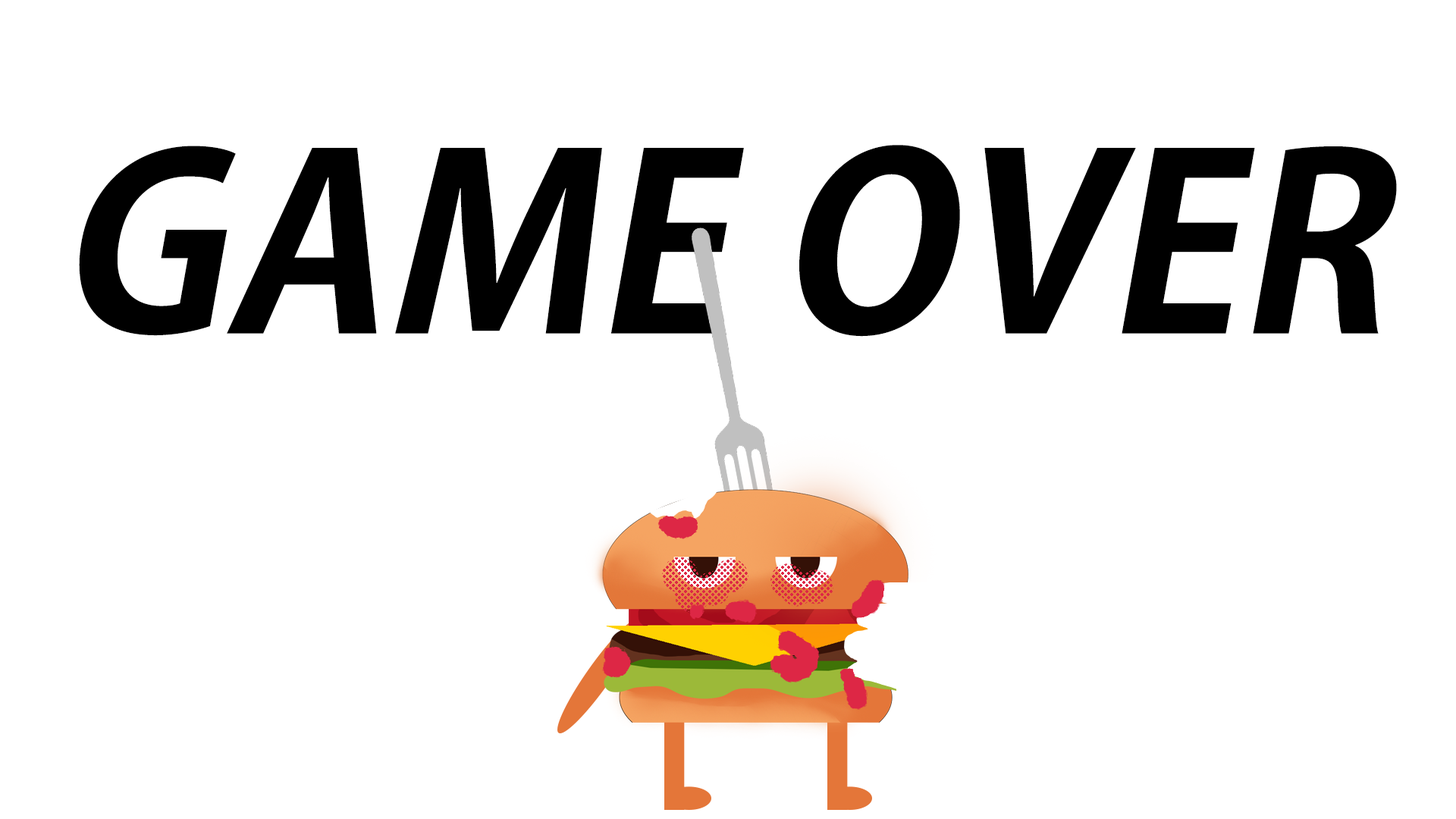
<style>
.page{position:relative;width:1456px;height:819px;background:#ffffff}
.page>*{position:absolute;margin:0}
.t1{font:241.2px "AdobeGothicStd-Bold";color:#000000;text-transform:uppercase;font-style:italic}
</style>
<div class="page">
<p class="t1" style="left:79px;top:145px;width:1318px;height:192px">GAME OVER</p>
</div>
